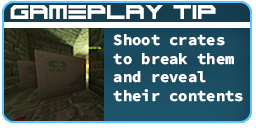
<style>
.page{position:relative;width:256px;height:128px}
.page>*{position:absolute;margin:0}
.t1{font:14px "ScifiAdventure";color:#ffffff}
.t2{font:15.5px "SourceCodeRoman-Bold";color:#ffffff}
</style>
<div class="page">
<p class="t1" style="left:10px;top:5px;width:206px;height:14px">GAMEPLAY TIP</p>
<p class="t2" style="left:113px;top:34px;width:130px;height:68px">Shoot crates <br>to break them<br>and reveal <br>their contents</p>
</div>
